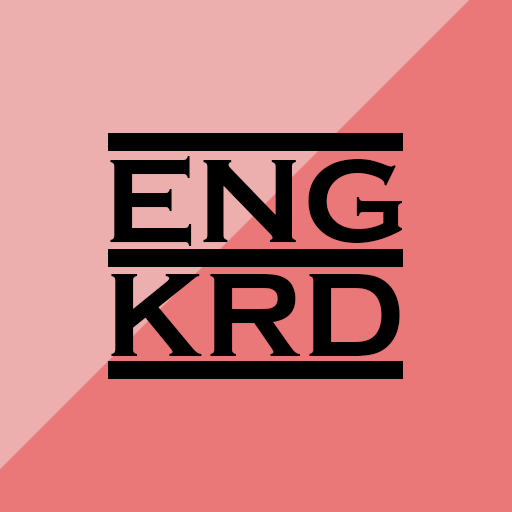
<style>
.page{position:relative;width:512px;height:512px;background:#eb7878}
.page>*{position:absolute;margin:0}
.t1{font:123px "CopperplateGothic-Bold";color:#000000}
</style>
<div class="page">
<p class="t1" style="left:110px;top:156px;width:292px;height:90px">ENG</p>
<p class="t1" style="left:111px;top:274px;width:289px;height:82px">KRD</p>
</div>
